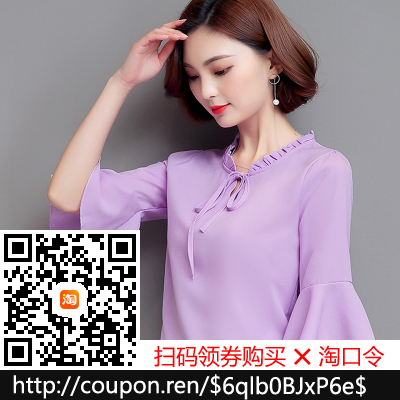
<style>
.page{position:relative;width:400px;height:400px}
.page>*{position:absolute;margin:0}
.t1{font:22px "MicrosoftYaHei";color:#ff0000}
.t2{font:36px "MicrosoftYaHei";color:#ff0000}
.t3{font:22px "MicrosoftYaHei";color:#ffffff}
</style>
<div class="page">
<p class="t1" style="left:154px;top:345px;width:231px;height:23px">扫码领券购买     淘口令</p>
<p class="t2" style="left:294px;top:348px;width:17px;height:17px">×</p>
<p class="t3" style="left:13px;top:374px;width:208px;height:25px">http://coupon.ren/$</p>
<p class="t3" style="left:223px;top:375px;width:143px;height:25px">6qlb0BJxP6e$</p>
</div>
